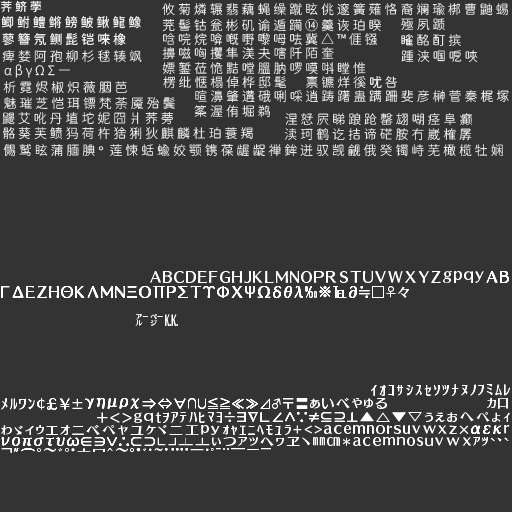
<style>
.page{position:relative;width:512px;height:512px;background:#333333}
.page>*{position:absolute;margin:0}
.t1{font:12px "jiangchengyuanti-400W";color:#ffffff}
.t2{font:13px "JiangChengYuanTi-300W"}
.t3{font:13px "JiangChengYuanTi402-400W2";color:#ffffff}
.t4{font:13px "JiangChengYuanTi-300W";color:#ffffff}
.t5{font:13px "-400W4";color:#ffffff}
</style>
<div class="page">
<p class="t1" style="left:0px;top:0px;width:42px;height:13px">荠 鲚 荸</p>
<p class="t2" style="left:162px;top:3px;width:346px;height:13px">攸 菊 燐 辗 翡 藕 蝇 缲 蹴 眩 佻 邃 簧 薙 恪 裔 斓 瑜 梆 曹 鼬 蜴</p>
<p class="t2" style="left:162px;top:18px;width:219px;height:14px">茺 髻 钴 瓮 彬 矶 谕 遁 躏 ⑭ 羹 诙 珀 睽</p>
<p class="t2" style="left:401px;top:18px;width:44px;height:13px">殛 夙 踬</p>
<p class="t3" style="left:2px;top:33px;width:124px;height:13px">蓼 簪 氖 鲗 髭 铠 唻 橡</p>
<p class="t2" style="left:163px;top:33px;width:214px;height:13px">唅 唍 烷 啽 嘅 嘢 嚟 呣 呿 冀 △ ™ 𠊎 镪</p>
<p class="t2" style="left:2px;top:50px;width:140px;height:13px">痺 婪 阿 孢 柳 杉 毬 辏 飒</p>
<p class="t4" style="left:162px;top:47px;width:172px;height:13px">擤 嗞 哅 攫 隼 渼 夬 嗐 阡 陌 奎</p>
<p class="t2" style="left:401px;top:50px;width:77px;height:12px">踵 浃 啯 呝 唊</p>
<p class="t2" style="left:4px;top:64px;width:66px;height:14px">α β γ Ω Σ ―</p>
<p class="t2" style="left:162px;top:62px;width:204px;height:13px">嫖 錾 莅 恑 黠 嘡 腽 肭 啰 嗼 唞 瞠 惟</p>
<p class="t2" style="left:163px;top:76px;width:124px;height:13px">楞 纰 惬 榻 倬 桦 邸 髦</p>
<p class="t4" style="left:306px;top:76px;width:91px;height:13px">禀 镳 烊 徯 <span class="t5">㕱 </span>咎</p>
<p class="t2" style="left:3px;top:81px;width:124px;height:13px">析 霓 烬 椒 炽 薇 胭 芭</p>
<p class="t2" style="left:4px;top:97px;width:171px;height:13px">魅 璀 芝 恺 珥 镖 梵 荼 魇 殆 鬓</p>
<p class="t2" style="left:195px;top:90px;width:314px;height:13px">暄 濞 肇 遘 硪 唎 啋 逍 踌 躇 蛊 蹒 跚 斐 彦 榊 菅 秦 梶 塚</p>
<p class="t2" style="left:2px;top:112px;width:172px;height:13px">鼹 艾 吪 丹 埴 坨 妮 囧 爿 荞 蒡</p>
<p class="t2" style="left:194px;top:105px;width:76px;height:13px">筿 渥 侑 堀 鹈</p>
<p class="t4" style="left:285px;top:113px;width:187px;height:13px">涅 恏 屄 睇 踉 跄 罄 翃 㗅 痉 阜 癫</p>
<p class="t4" style="left:3px;top:127px;width:250px;height:13px">骼 葵 芙 鲼 犸 荷 杵 猞 猁 狄 麒 麟 杜 珀 蓑 羯</p>
<p class="t2" style="left:285px;top:128px;width:187px;height:13px">渎 珂 鹤 讫 拮 谛 硭 胺 冇 崴 榷 孱</p>
<p class="t2" style="left:3px;top:144px;width:13px;height:13px">儩</p>
<p class="t4" style="left:19px;top:144px;width:484px;height:13px">鹫 眩 蒲 腼 腆 °  莲 悚 蛞 蝓 姣 颚 镌 葆 龌 龊 禅 鉾 迸 驭 觊 觎 俄 癸 镯 峙 芜 橄 榄 牡 娴</p>
</div>
